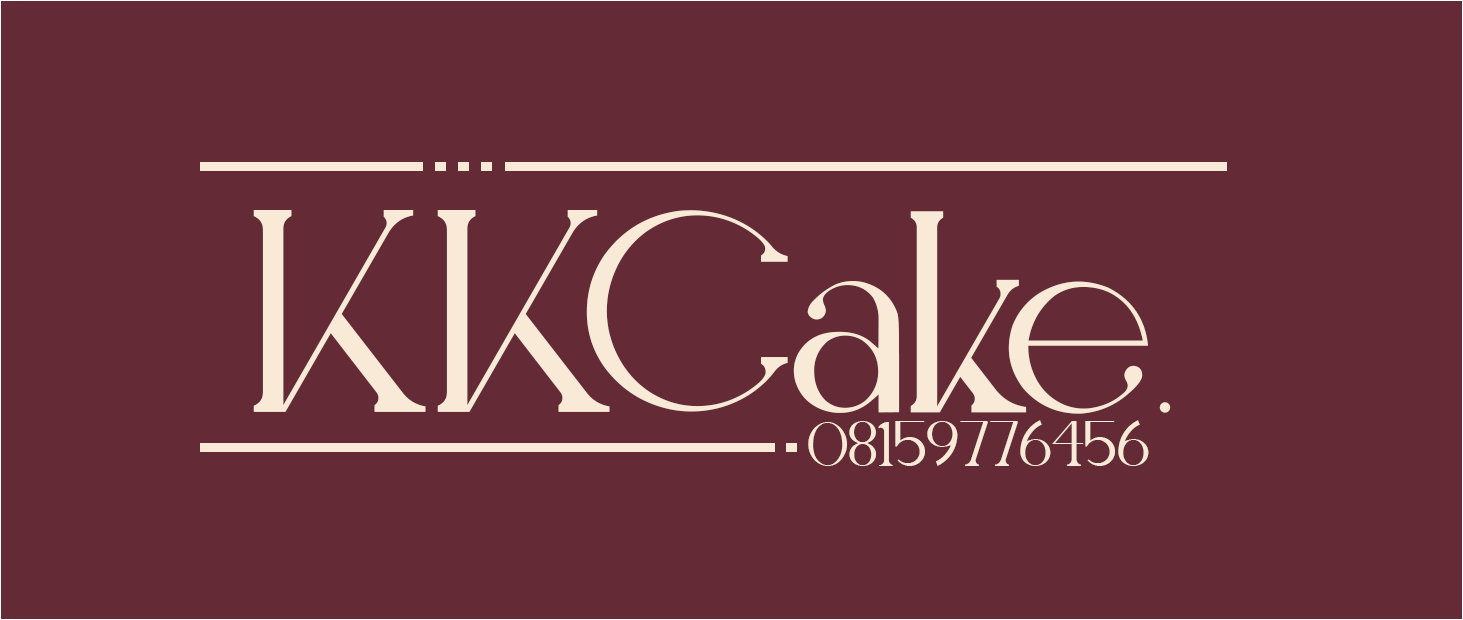
<style>
.page{position:relative;width:1463px;height:620px;background:#642a36}
.page>*{position:absolute;margin:0}
.t1{font:300px "ELEGANTPersonaluse";color:#f9ead7}
.t2{font:66.7px "ELEGANTPersonaluse";color:#f9ead7}
</style>
<div class="page">
<p class="t1" style="left:253px;top:210px;width:918px;height:204px">KKCake.</p>
<p class="t2" style="left:808px;top:420px;width:341px;height:46px">08159776456</p>
</div>
